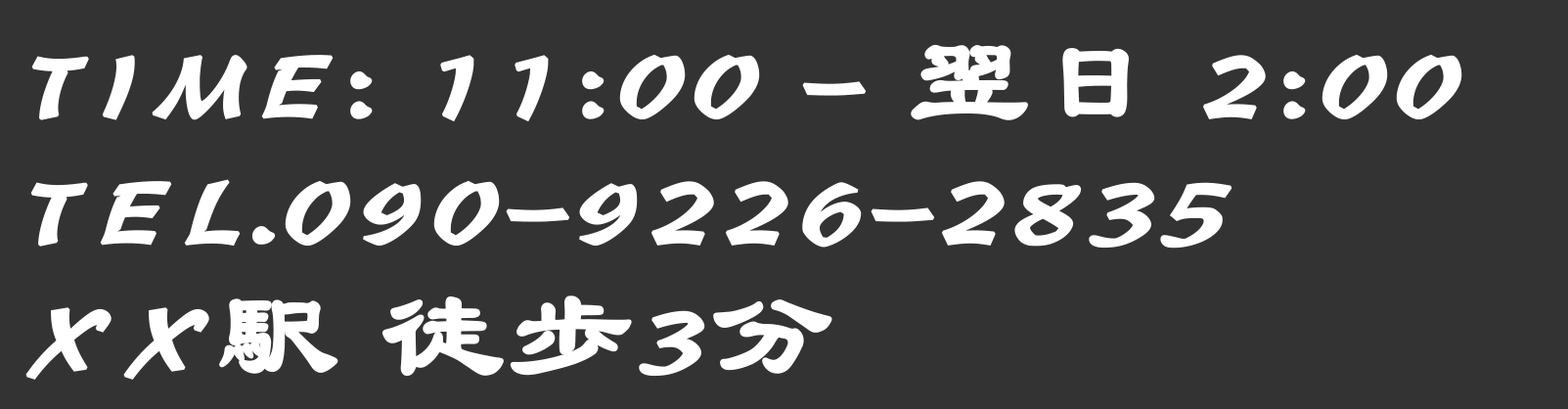
<style>
.page{position:relative;width:1568px;height:409px;background:#333333}
.page>*{position:absolute;margin:0}
.t1{font:122.3px "STBaoliSC-Regular";letter-spacing:0.02em;color:#ffffff;text-transform:uppercase;font-weight:bold}
</style>
<div class="page">
<p class="t1" style="left:31px;top:44px;width:1431px;height:78px">Time: 11:00 - 翌日 2:00</p>
<p class="t1" style="left:30px;top:179px;width:1202px;height:69px">Tel.090-9226-2835</p>
<p class="t1" style="left:25px;top:295px;width:807px;height:85px">XX駅 徒歩3分</p>
</div>
